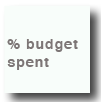
<style>
.page{position:relative;width:101px;height:102px;background:#f8fdfa}
.page>*{position:absolute;margin:0}
.t1{font:14px/18px "Helvetica-Bold";letter-spacing:0.075em;color:#7d7676}
</style>
<div class="page">
<p class="t1" style="left:7px;top:39px;width:71px;height:31px">% budget<br>spent</p>
</div>
